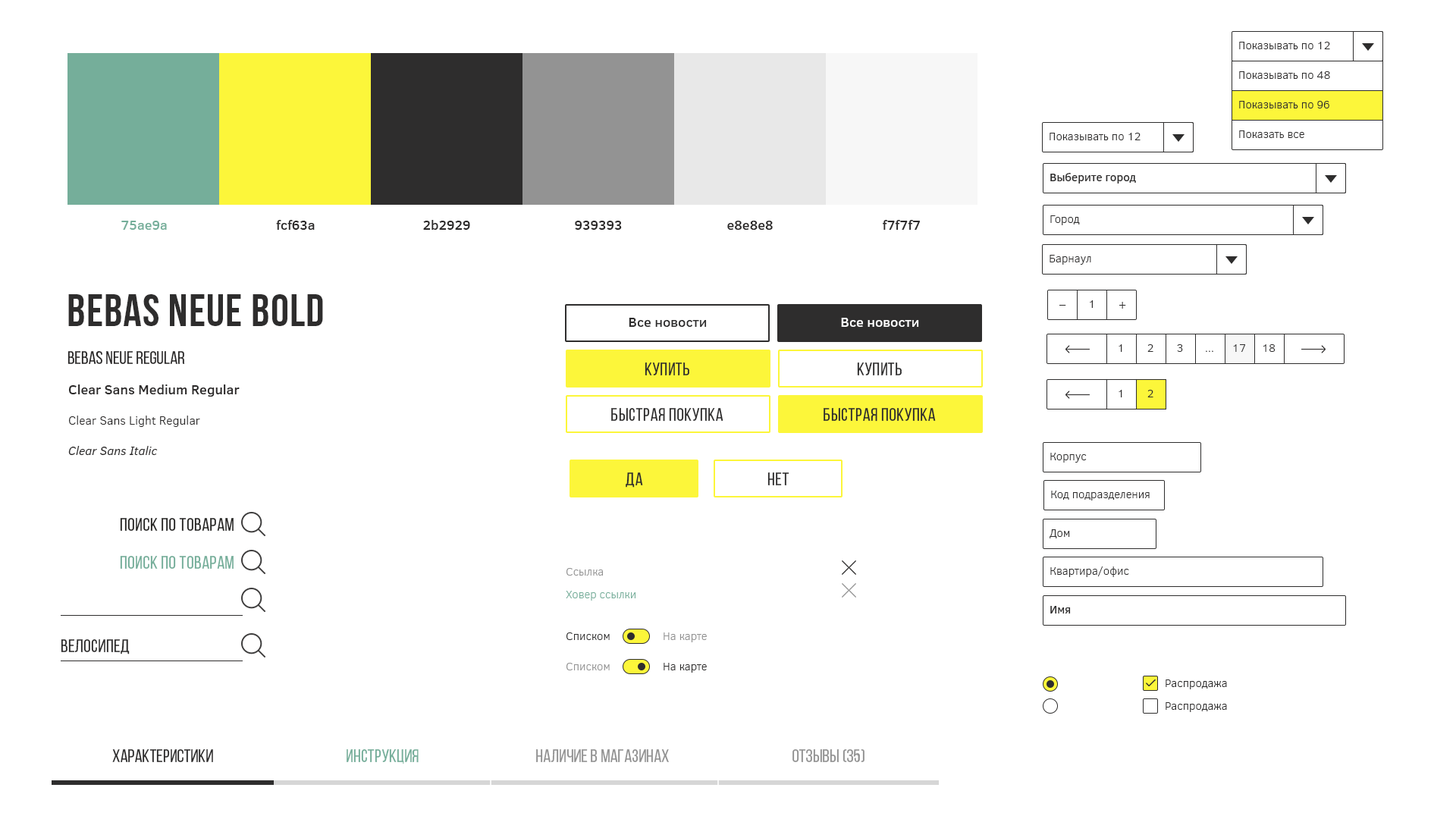
<style>
.page{position:relative;width:1456px;height:819px;background:#ffffff}
.page>*{position:absolute;margin:0}
.t1{font:11.4px "ClearSans-Light";color:#2e2d2d}
.t2{font:11.4px "ClearSans-Medium";color:#2e2d2d}
.t3{font:13.6px "ClearSans-Medium";color:#75ae9a}
.t4{font:13.6px "ClearSans-Medium";color:#2b2929}
.t5{font:45.5px "BebasNeueBold";letter-spacing:0.02em;color:#2e2d2d}
.t6{font:11.4px "ClearSans-Italic";color:#2e2d2d}
.t7{font:13.6px "ClearSans-Medium";color:#2e2d2d}
.t8{font:13.6px "ClearSans-Medium";color:#ffffff}
.t9{font:18.2px "BebasNeueRegular";color:#2b2929}
.t10{font:11.4px "ClearSans-Light"}
.t11{font:18.2px "BebasNeueRegular";letter-spacing:0.02em;color:#2e2d2d}
.t12{font:12.1px "ClearSans-Light";color:#2b2929}
.t13{font:12.1px "ClearSans-Italic";color:#2b2929}
.t14{font:18.2px "BebasNeueRegular";letter-spacing:0.02em;color:#272624}
.t15{font:18.2px "BebasNeueRegular";letter-spacing:0.02em;color:#75ae9a}
.t16{font:11.4px "ClearSans-Light";color:#939393}
.t17{font:11.4px "ClearSans-Light";color:#75ae9a}
.t18{font:11.4px "ClearSans-Light";color:#929292}
.t19{font:18.2px "BebasNeueRegular";color:#2e2d2d;text-transform:uppercase}
.t20{font:18.2px "BebasNeueRegular";color:#75ae9a;text-transform:uppercase}
.t21{font:18.2px "BebasNeueRegular";color:#929292;text-transform:uppercase}
</style>
<div class="page">
<p class="t1" style="left:1239px;top:42px;width:91px;height:7px">Показывать по 12</p>
<p class="t1" style="left:1239px;top:71px;width:91px;height:8px">Показывать по 48</p>
<p class="t1" style="left:1239px;top:101px;width:90px;height:7px">Показывать по 96</p>
<p class="t1" style="left:1050px;top:133px;width:91px;height:7px">Показывать по 12</p>
<p class="t1" style="left:1239px;top:130px;width:65px;height:8px">Показать все</p>
<p class="t2" style="left:1050px;top:173px;width:86px;height:11px">Выберите город</p>
<p class="t3" style="left:121px;top:221px;width:46px;height:9px">75ae9a</p>
<p class="t4" style="left:276px;top:220px;width:39px;height:10px">fcf63a</p>
<p class="t4" style="left:423px;top:220px;width:47px;height:10px">2b2929</p>
<p class="t4" style="left:575px;top:221px;width:47px;height:9px">939393</p>
<p class="t4" style="left:727px;top:221px;width:46px;height:9px">e8e8e8</p>
<p class="t4" style="left:883px;top:220px;width:37px;height:10px">f7f7f7</p>
<p class="t1" style="left:1050px;top:215px;width:30px;height:10px">Город</p>
<p class="t1" style="left:1050px;top:255px;width:41px;height:10px">Барнаул</p>
<p class="t5" style="left:68px;top:294px;width:255px;height:32px">Bebas Neue Bold</p>
<p class="t6" style="left:1059px;top:305px;width:7px;height:1px">−</p>
<p class="t1" style="left:1090px;top:300px;width:3px;height:8px">1</p>
<p class="t6" style="left:1119px;top:302px;width:7px;height:7px">+</p>
<p class="t7" style="left:629px;top:318px;width:78px;height:9px">Все новости</p>
<p class="t8" style="left:841px;top:318px;width:78px;height:9px">Все новости</p>
<p class="t9" style="left:67px;top:350px;width:118px;height:14px">Bebas Neue Regular</p>
<p class="t1" style="left:1119px;top:344px;width:3px;height:8px">1</p>
<p class="t1" style="left:1147px;top:344px;width:6px;height:8px">2</p>
<p class="t1" style="left:1177px;top:344px;width:6px;height:8px">3</p>
<p class="t10" style="left:1206px;top:350px;width:7px;height:2px">...</p>
<p class="t1" style="left:1233px;top:344px;width:12px;height:8px">17</p>
<p class="t1" style="left:1263px;top:344px;width:12px;height:8px">18</p>
<p class="t11" style="left:645px;top:362px;width:44px;height:13px">КУПИТЬ</p>
<p class="t11" style="left:857px;top:362px;width:45px;height:13px">КУПИТЬ</p>
<p class="t4" style="left:68px;top:384px;width:172px;height:13px">Clear Sans Medium Regular</p>
<p class="t1" style="left:1119px;top:390px;width:3px;height:7px">1</p>
<p class="t1" style="left:1147px;top:390px;width:6px;height:7px">2</p>
<p class="t11" style="left:611px;top:408px;width:112px;height:14px">Быстрая покупка</p>
<p class="t11" style="left:824px;top:408px;width:112px;height:14px">Быстрая покупка</p>
<p class="t12" style="left:69px;top:416px;width:131px;height:11px">Clear Sans Light Regular</p>
<p class="t13" style="left:68px;top:446px;width:90px;height:9px">Clear Sans Italic</p>
<p class="t1" style="left:1050px;top:453px;width:37px;height:10px">Корпус</p>
<p class="t11" style="left:626px;top:472px;width:17px;height:16px">Да</p>
<p class="t11" style="left:767px;top:472px;width:22px;height:13px">нет</p>
<p class="t1" style="left:1051px;top:491px;width:99px;height:9px">Код подразделения</p>
<p class="t14" style="left:120px;top:518px;width:114px;height:13px">Поиск по товарам</p>
<p class="t1" style="left:1050px;top:529px;width:20px;height:9px">Дом</p>
<p class="t15" style="left:120px;top:556px;width:114px;height:13px">Поиск по товарам</p>
<p class="t16" style="left:566px;top:568px;width:37px;height:8px">Ссылка</p>
<p class="t1" style="left:1050px;top:566px;width:79px;height:11px">Квартира/офис</p>
<p class="t17" style="left:566px;top:591px;width:69px;height:10px">Ховер ссылки</p>
<p class="t2" style="left:1050px;top:606px;width:21px;height:7px">Имя</p>
<p class="t11" style="left:61px;top:639px;width:69px;height:15px">ВЕЛОСИПЕД</p>
<p class="t1" style="left:566px;top:632px;width:44px;height:8px">Списком</p>
<p class="t18" style="left:664px;top:632px;width:43px;height:10px">На карте</p>
<p class="t16" style="left:566px;top:663px;width:44px;height:7px">Списком</p>
<p class="t1" style="left:664px;top:663px;width:43px;height:10px">На карте</p>
<p class="t1" style="left:1166px;top:679px;width:61px;height:10px">Распродажа</p>
<p class="t1" style="left:1166px;top:702px;width:61px;height:10px">Распродажа</p>
<p class="t19" style="left:112px;top:749px;width:101px;height:13px">Характеристики</p>
<p class="t20" style="left:347px;top:749px;width:72px;height:15px">инструкция</p>
<p class="t21" style="left:536px;top:749px;width:133px;height:13px">наличие в магазинах</p>
<p class="t21" style="left:792px;top:749px;width:72px;height:13px">отзывы (35)</p>
</div>
